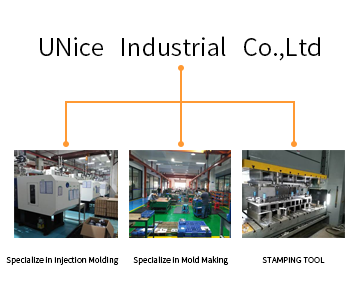
<style>
.page{position:relative;width:360px;height:300px;background:#ffffff}
.page>*{position:absolute;margin:0}
.t1{font:24px "SourceHanSansCN-Normal";color:#000000}
.t2{font:8px "SourceHanSansCN-Normal";color:#000000}
</style>
<div class="page">
<p class="t1" style="left:40px;top:36px;width:280px;height:25px">UNice   Industrial   Co.,Ltd</p>
<p class="t2" style="left:6px;top:256px;width:113px;height:9px">Specialize in Injection Molding</p>
<p class="t2" style="left:133px;top:256px;width:96px;height:9px">Specialize in Mold Making</p>
<p class="t2" style="left:262px;top:257px;width:63px;height:6px">STAMPING TOOL</p>
</div>
